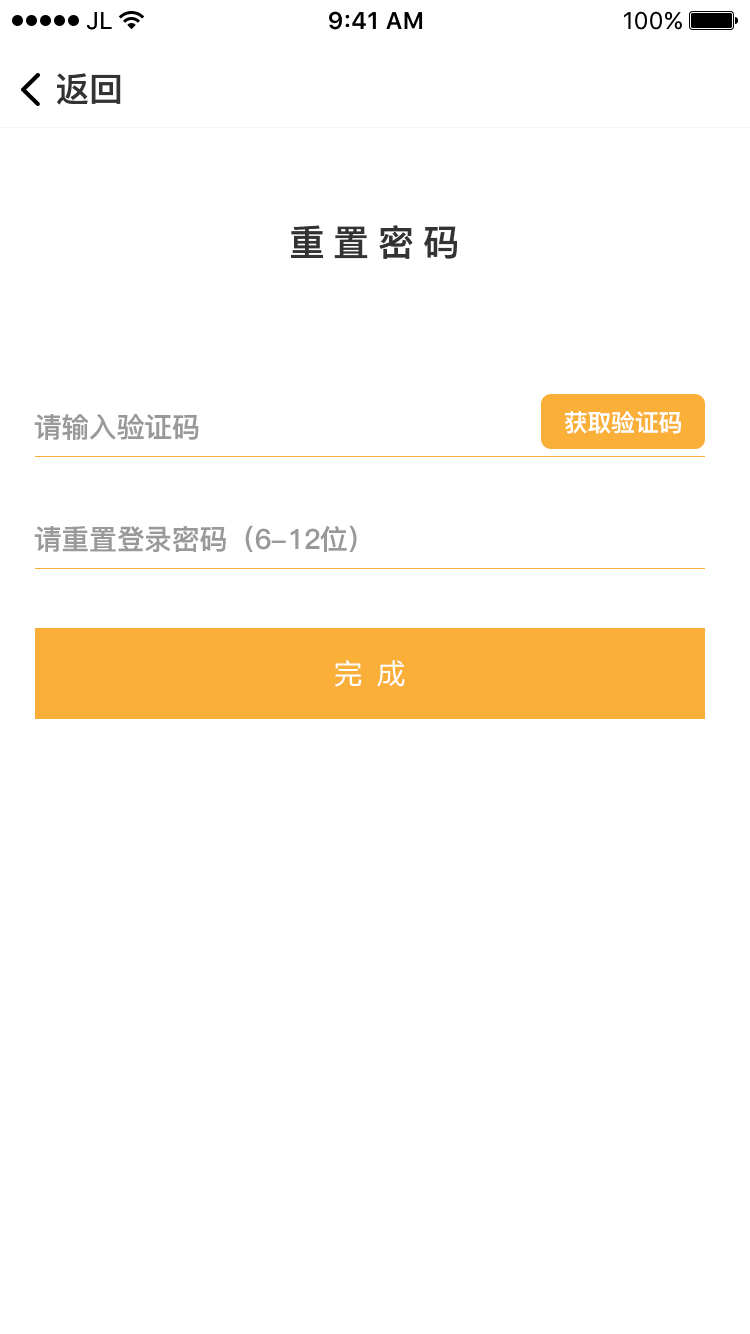
<style>
.page{position:relative;width:750px;height:1334px;background:#ffffff}
.page>*{position:absolute;margin:0}
.t1{font:34px "PingFang-SC-Heavy";color:#333333}
.t2{font:36px "PingFang-SC-Heavy";letter-spacing:0.24em;color:#333333}
.t3{font:28px "PingFang-SC-Heavy";color:#999999}
.t4{font:24px "PingFang-SC-Heavy";color:#ffffff}
.t5{font:27.6px "MicrosoftYaHei";letter-spacing:0.56em;color:#fefefe}
</style>
<div class="page">
<p class="t1" style="left:56px;top:73px;width:65px;height:32px">返回</p>
<p class="t2" style="left:291px;top:225px;width:166px;height:34px">重置密码</p>
<p class="t3" style="left:34px;top:414px;width:165px;height:26px">请输入验证码</p>
<p class="t4" style="left:564px;top:411px;width:117px;height:23px">获取验证码</p>
<p class="t3" style="left:34px;top:525px;width:323px;height:27px">请重置登录密码（6-12位）</p>
<p class="t5" style="left:334px;top:660px;width:71px;height:27px">完成</p>
</div>
